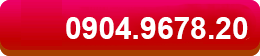
<style>
.page{position:relative;width:260px;height:56px}
.page>*{position:absolute;margin:0}
.t1{font:30px "Arial-BoldMT";color:#ffffff}
</style>
<div class="page">
<p class="t1" style="left:66px;top:17px;width:182px;height:22px">0904.9678.20</p>
</div>
